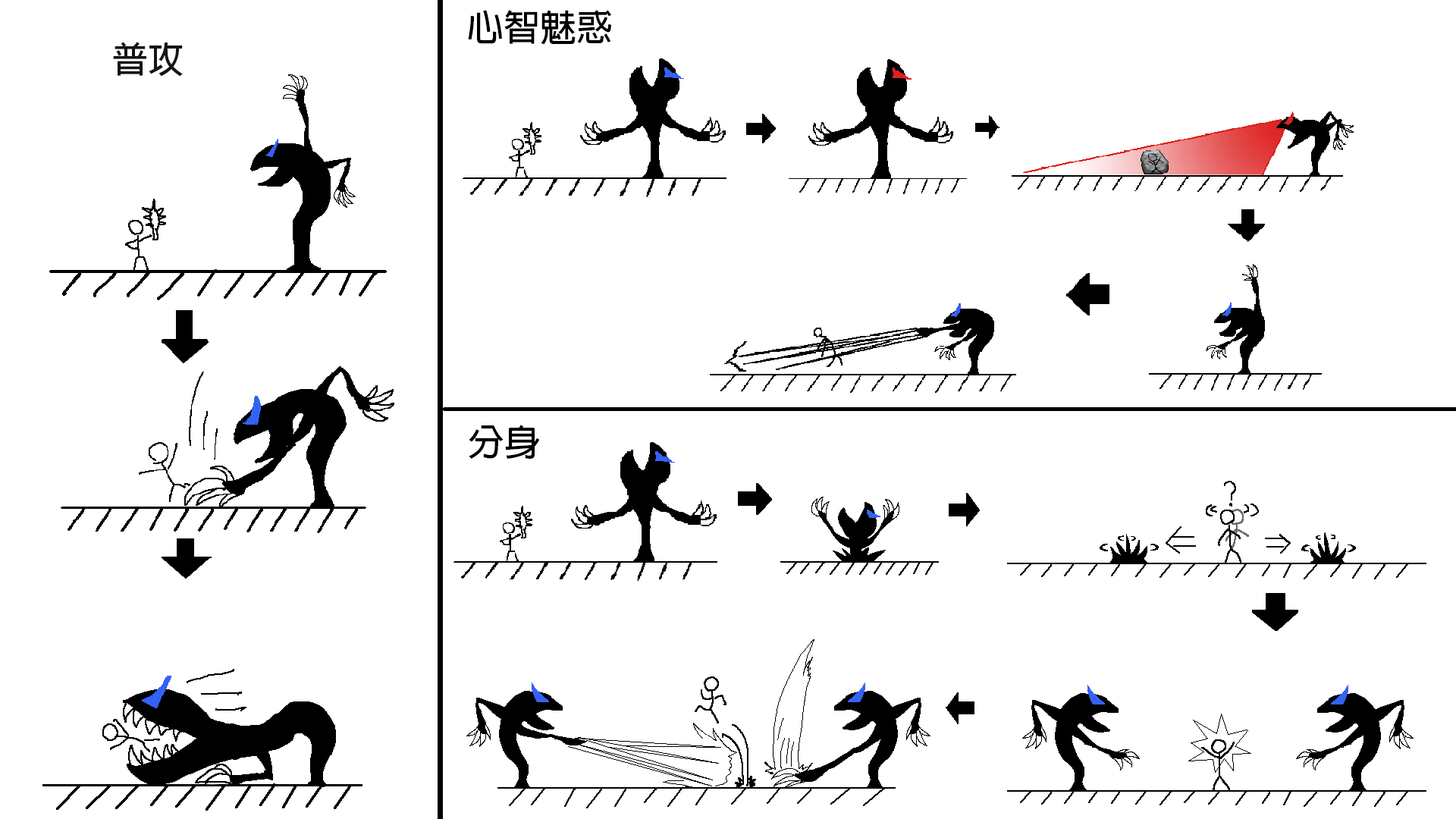
<style>
.page{position:relative;width:1456px;height:819px;background:#ffffff}
.page>*{position:absolute;margin:0}
.t1{font:36.4px "AdobeFanHeitiStd-Bold";color:#000000}
.t2{font:36.4px "AdobeFanHeitiStd-Bold";color:#151515}
</style>
<div class="page">
<p class="t1" style="left:468px;top:10px;width:143px;height:35px">心智魅惑</p>
<p class="t2" style="left:113px;top:42px;width:70px;height:35px">普攻</p>
<p class="t1" style="left:469px;top:425px;width:71px;height:34px">分身</p>
</div>
